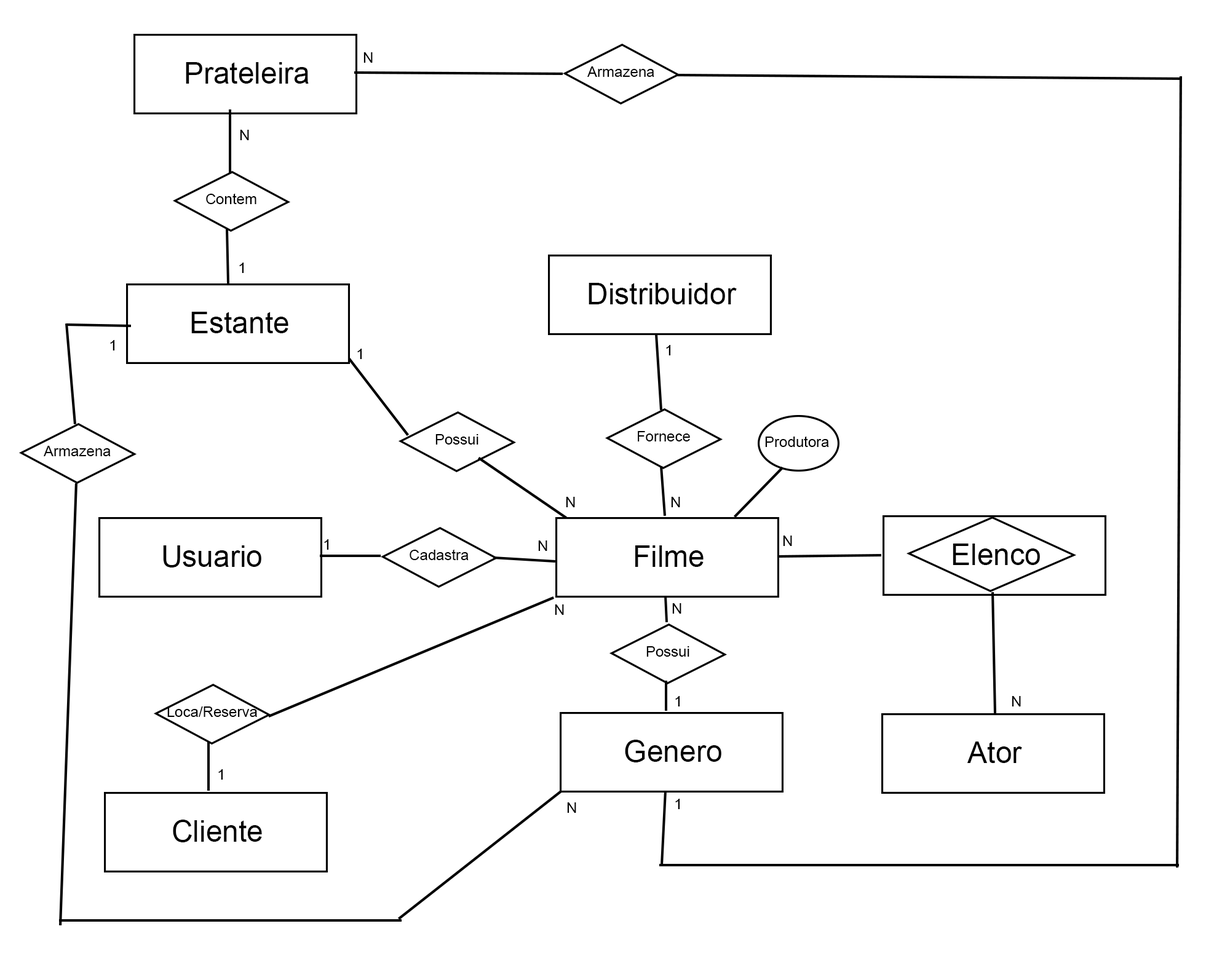
<style>
.page{position:relative;width:1230px;height:969px;background:#ffffff}
.page>*{position:absolute;margin:0}
.t1{font:14.8px "ArialMT";color:#000000}
.t2{font:29.5px "ArialMT";color:#000000}
</style>
<div class="page">
<p class="t1" style="left:364px;top:52px;width:9px;height:11px">N</p>
<p class="t2" style="left:186px;top:62px;width:123px;height:22px">Prateleira</p>
<p class="t1" style="left:587px;top:66px;width:67px;height:11px">Armazena</p>
<p class="t1" style="left:240px;top:130px;width:9px;height:10px">N</p>
<p class="t1" style="left:206px;top:193px;width:50px;height:11px">Contem</p>
<p class="t1" style="left:239px;top:263px;width:5px;height:10px">1</p>
<p class="t2" style="left:589px;top:283px;width:148px;height:21px">Distribuidor</p>
<p class="t2" style="left:191px;top:312px;width:97px;height:21px">Estante</p>
<p class="t1" style="left:110px;top:340px;width:5px;height:11px">1</p>
<p class="t1" style="left:357px;top:349px;width:5px;height:10px">1</p>
<p class="t1" style="left:666px;top:345px;width:5px;height:11px">1</p>
<p class="t1" style="left:435px;top:434px;width:44px;height:11px">Possui</p>
<p class="t1" style="left:638px;top:431px;width:52px;height:11px">Fornece</p>
<p class="t1" style="left:765px;top:436px;width:64px;height:11px">Produtora</p>
<p class="t1" style="left:44px;top:446px;width:67px;height:10px">Armazena</p>
<p class="t1" style="left:566px;top:497px;width:9px;height:10px">N</p>
<p class="t1" style="left:671px;top:497px;width:9px;height:10px">N</p>
<p class="t2" style="left:163px;top:546px;width:98px;height:22px">Usuario</p>
<p class="t1" style="left:324px;top:539px;width:5px;height:11px">1</p>
<p class="t1" style="left:538px;top:541px;width:9px;height:10px">N</p>
<p class="t2" style="left:635px;top:546px;width:69px;height:21px">Filme</p>
<p class="t1" style="left:783px;top:536px;width:9px;height:10px">N</p>
<p class="t2" style="left:953px;top:544px;width:87px;height:21px">Elenco</p>
<p class="t1" style="left:410px;top:549px;width:59px;height:11px">Cadastra</p>
<p class="t1" style="left:555px;top:605px;width:9px;height:10px">N</p>
<p class="t1" style="left:672px;top:603px;width:9px;height:11px">N</p>
<p class="t1" style="left:646px;top:646px;width:43px;height:11px">Possui</p>
<p class="t1" style="left:675px;top:696px;width:5px;height:11px">1</p>
<p class="t1" style="left:1012px;top:696px;width:9px;height:11px">N</p>
<p class="t1" style="left:167px;top:707px;width:90px;height:10px">Loca/Reserva</p>
<p class="t2" style="left:625px;top:740px;width:96px;height:23px">Genero</p>
<p class="t2" style="left:967px;top:742px;width:55px;height:21px">Ator</p>
<p class="t1" style="left:218px;top:769px;width:5px;height:11px">1</p>
<p class="t1" style="left:567px;top:803px;width:9px;height:10px">N</p>
<p class="t1" style="left:675px;top:799px;width:5px;height:10px">1</p>
<p class="t2" style="left:173px;top:820px;width:89px;height:23px">Cliente</p>
</div>
